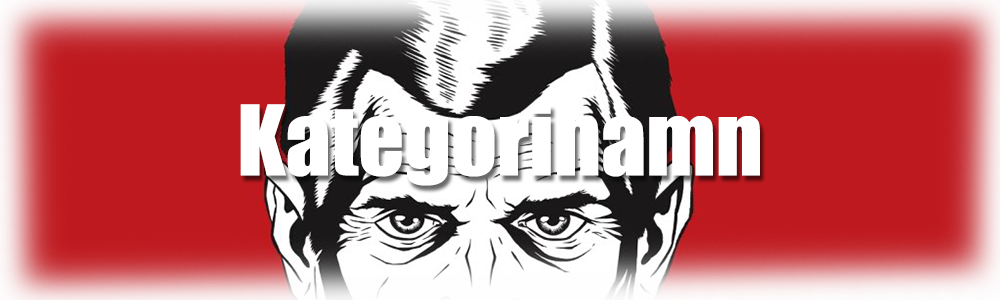
<style>
.page{position:relative;width:1000px;height:300px;background:#be191f}
.page>*{position:absolute;margin:0}
.t1{font:90px "Impact";color:#ffffff}
</style>
<div class="page">
<p class="t1" style="left:240px;top:104px;width:520px;height:82px">Kategorinamn</p>
</div>
